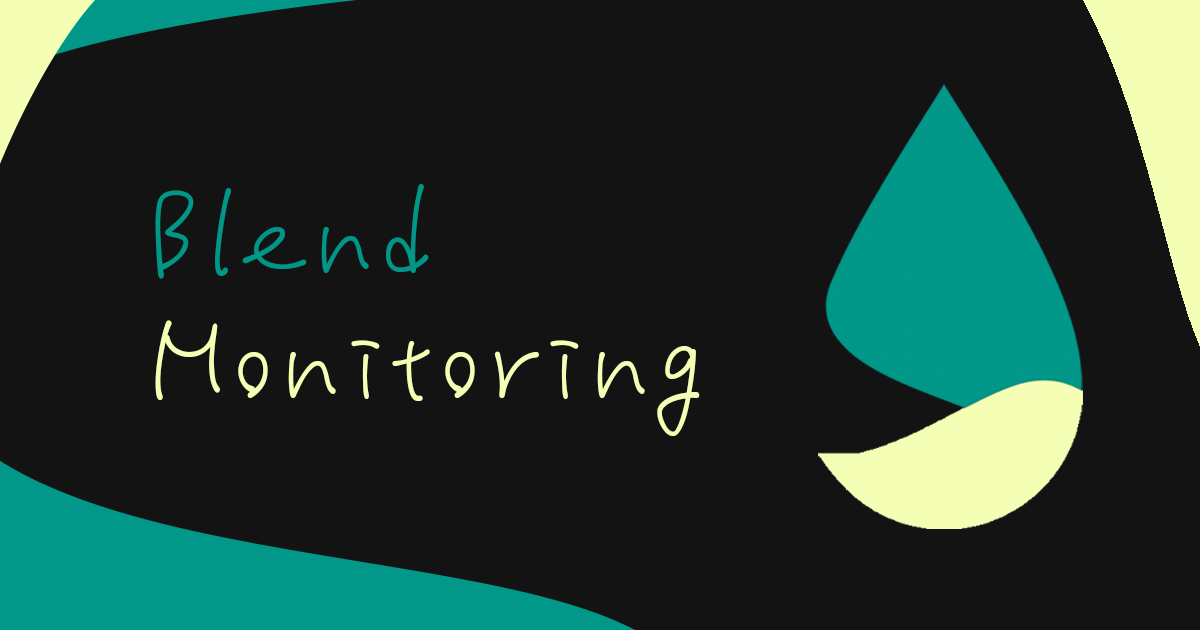
<style>
.page{position:relative;width:1200px;height:630px;background:#131313}
.page>*{position:absolute;margin:0}
.t1{font:144px/125px "karakaze_plus-R";letter-spacing:0.05em;color:#f4ffb5;scale:0.93 1}
.t2{font:144px/125px "karakaze_plus-R";letter-spacing:0.05em;color:#009688;scale:0.93 1}
</style>
<div class="page">
<p class="t1" style="left:155px;top:184px;width:545px;height:252px"><span class="t2">Blend<br></span>Monitoring</p>
</div>
